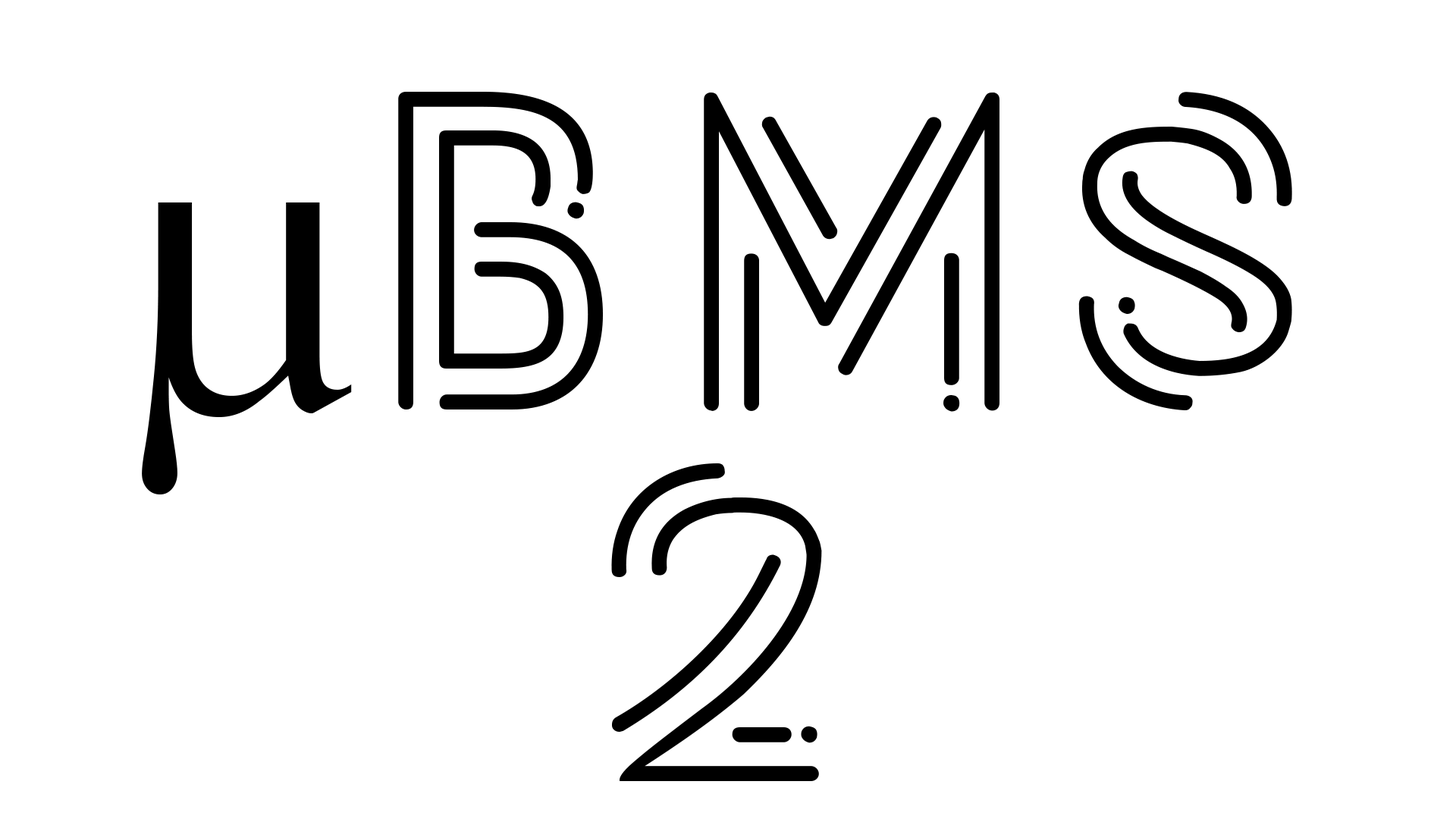
<style>
.page{position:relative;width:1456px;height:819px;background:#ffffff}
.page>*{position:absolute;margin:0}
.t1{font:455px "Potra";letter-spacing:0.025em;color:#000000}
.t2{font:455px "BaskOldFace";letter-spacing:0.025em;color:#000000}
</style>
<div class="page">
<p class="t1" style="left:142px;top:92px;width:1150px;height:402px"><span class="t2">μ</span>BMS</p>
<p class="t1" style="left:611px;top:463px;width:211px;height:318px">2</p>
</div>
